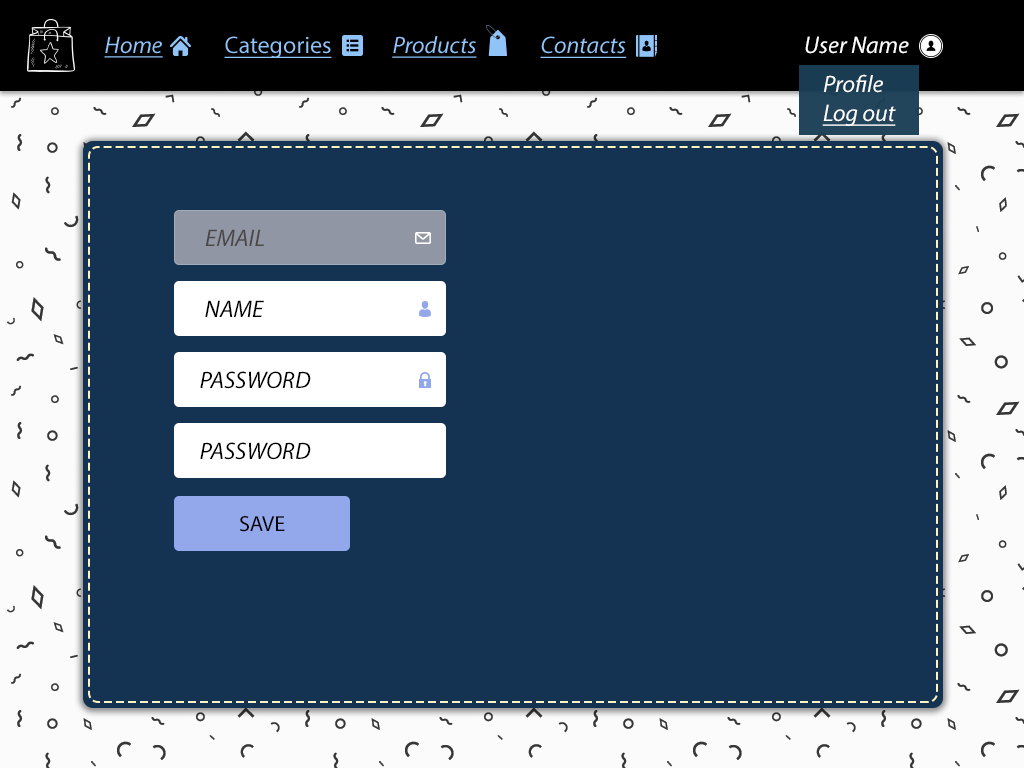
<style>
.page{position:relative;width:1024px;height:768px;background:#143251}
.page>*{position:absolute;margin:0}
.t1{font:24px "MyriadPro-It";color:#90c3f8;text-decoration:underline}
.t2{font:24px "MyriadPro-Regular";color:#90c3f8;text-decoration:underline}
.t3{font:24px "MyriadPro-It";color:#ffffff}
.t4{font:24px "MyriadPro-It";color:#ffffff;text-decoration:underline}
.t5{font:24px "MyriadPro-It";color:#4b4747}
.t6{font:24px "MyriadPro-It";color:#000000}
.t7{font:22px "MyriadPro-Regular";color:#020202;text-transform:uppercase}
</style>
<div class="page">
<p class="t1" style="left:104px;top:36px;width:59px;height:22px">Home</p>
<p class="t2" style="left:224px;top:36px;width:108px;height:22px">Categories</p>
<p class="t1" style="left:392px;top:36px;width:85px;height:22px">Products</p>
<p class="t1" style="left:540px;top:36px;width:87px;height:22px">Contacts</p>
<p class="t3" style="left:805px;top:36px;width:104px;height:18px">User Name</p>
<p class="t3" style="left:823px;top:74px;width:60px;height:19px">Profile</p>
<p class="t4" style="left:822px;top:104px;width:74px;height:22px">Log out</p>
<p class="t5" style="left:205px;top:229px;width:59px;height:17px">EMAIL</p>
<p class="t6" style="left:205px;top:300px;width:59px;height:17px">NAME</p>
<p class="t6" style="left:200px;top:371px;width:111px;height:18px">PASSWORD</p>
<p class="t6" style="left:200px;top:442px;width:111px;height:18px">PASSWORD</p>
<p class="t7" style="left:240px;top:516px;width:45px;height:16px">save</p>
</div>
